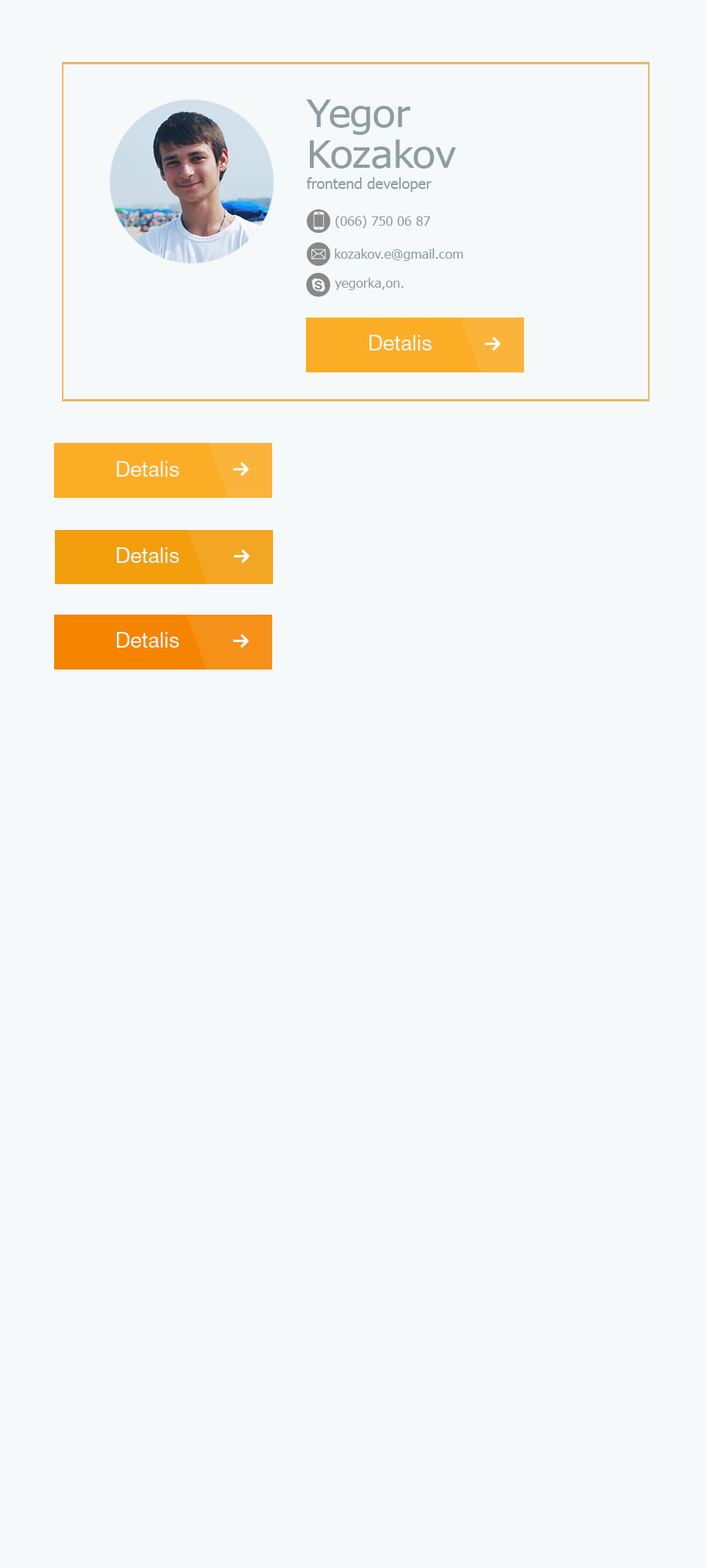
<style>
.page{position:relative;width:706px;height:1568px;background:#f6f9f9}
.page>*{position:absolute;margin:0}
.t1{font:37.5px/40.8px "Tahoma";color:#8d9da2;scale:1.1 1}
.t2{font:14.9px "Tahoma";color:#8d9da2}
.t3{font:13.3px "Tahoma";color:#8d9da2}
.t4{font:21.2px "HelveticaNeueCyr-Roman";color:#f6f9f9}
</style>
<div class="page">
<p class="t1" style="left:306px;top:100px;width:150px;height:69px">Yegor<br>Kozakov</p>
<p class="t2" style="left:307px;top:177px;width:124px;height:15px">frontend developer</p>
<p class="t3" style="left:335px;top:216px;width:95px;height:12px">(066) 750 06 87</p>
<p class="t3" style="left:335px;top:249px;width:128px;height:12px">kozakov.e@gmail.com</p>
<p class="t3" style="left:335px;top:278px;width:68px;height:12px">yegorka,on.</p>
<p class="t4" style="left:369px;top:335px;width:62px;height:15px">Detalis</p>
<p class="t4" style="left:117px;top:461px;width:62px;height:16px">Detalis</p>
<p class="t4" style="left:117px;top:547px;width:62px;height:16px">Detalis</p>
<p class="t4" style="left:117px;top:632px;width:62px;height:16px">Detalis</p>
</div>
